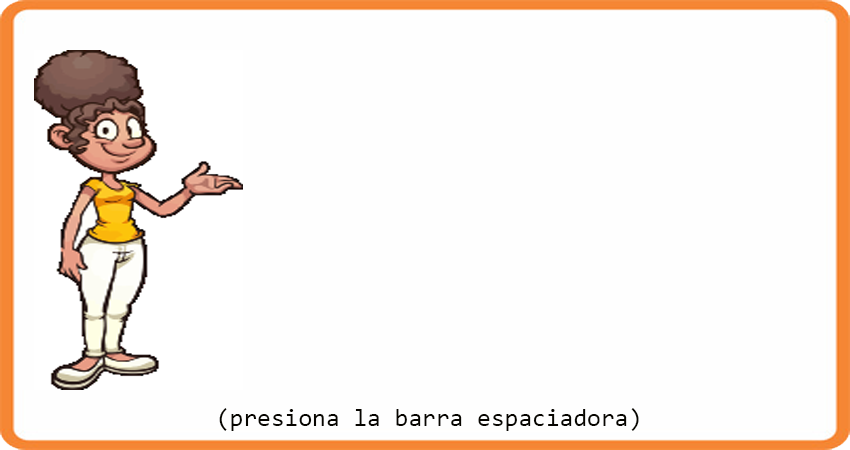
<style>
.page{position:relative;width:850px;height:450px;background:#fefefe}
.page>*{position:absolute;margin:0}
.t1{font:25px "Consolas";color:#070500}
</style>
<div class="page">
<p class="t1" style="left:219px;top:408px;width:420px;height:23px">(presiona la barra espaciadora)</p>
</div>
